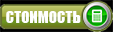
<style>
.page{position:relative;width:113px;height:32px}
.page>*{position:absolute;margin:0}
.t1{font:15.2px "Impact";color:#ffffff}
</style>
<div class="page">
<p class="t1" style="left:6px;top:11px;width:75px;height:12px">СТОИМОСТЬ</p>
</div>
